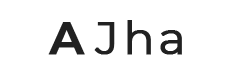
<style>
.page{position:relative;width:234px;height:80px;background:#ffffff}
.page>*{position:absolute;margin:0}
.t1{font:45.7px "Montserrat-Regular";letter-spacing:0.075em;color:#212121;font-weight:bold}
.t2{font:45.7px "Montserrat-SemiBold";letter-spacing:0.075em;color:#212121;font-weight:bold}
</style>
<div class="page">
<p class="t1" style="left:48px;top:20px;width:134px;height:35px"><span class="t2">A </span>Jha</p>
</div>
